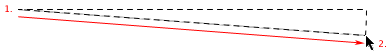
<style>
.page{position:relative;width:391px;height:55px;background:#ffffff}
.page>*{position:absolute;margin:0}
.t1{font:9px "LucidaGrande";color:#ff0000}
</style>
<div class="page">
<p class="t1" style="left:5px;top:5px;width:7px;height:7px">1.</p>
<p class="t1" style="left:379px;top:40px;width:7px;height:7px">2.</p>
</div>
